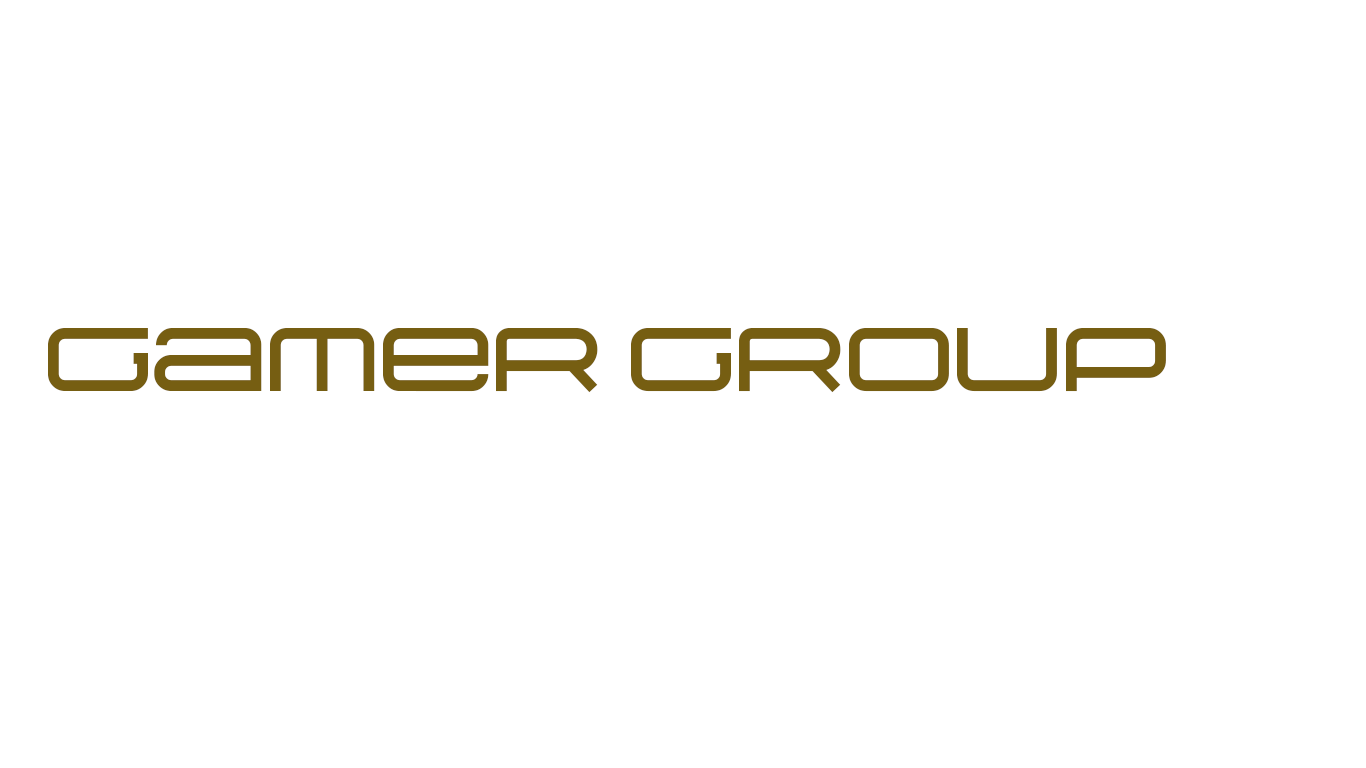
<style>
.page{position:relative;width:1366px;height:768px;background:#ffffff}
.page>*{position:absolute;margin:0}
.t1{font:115px "Suissnord";color:#765e12}
</style>
<div class="page">
<p class="t1" style="left:48px;top:328px;width:1118px;height:65px">Gamer Group</p>
</div>
